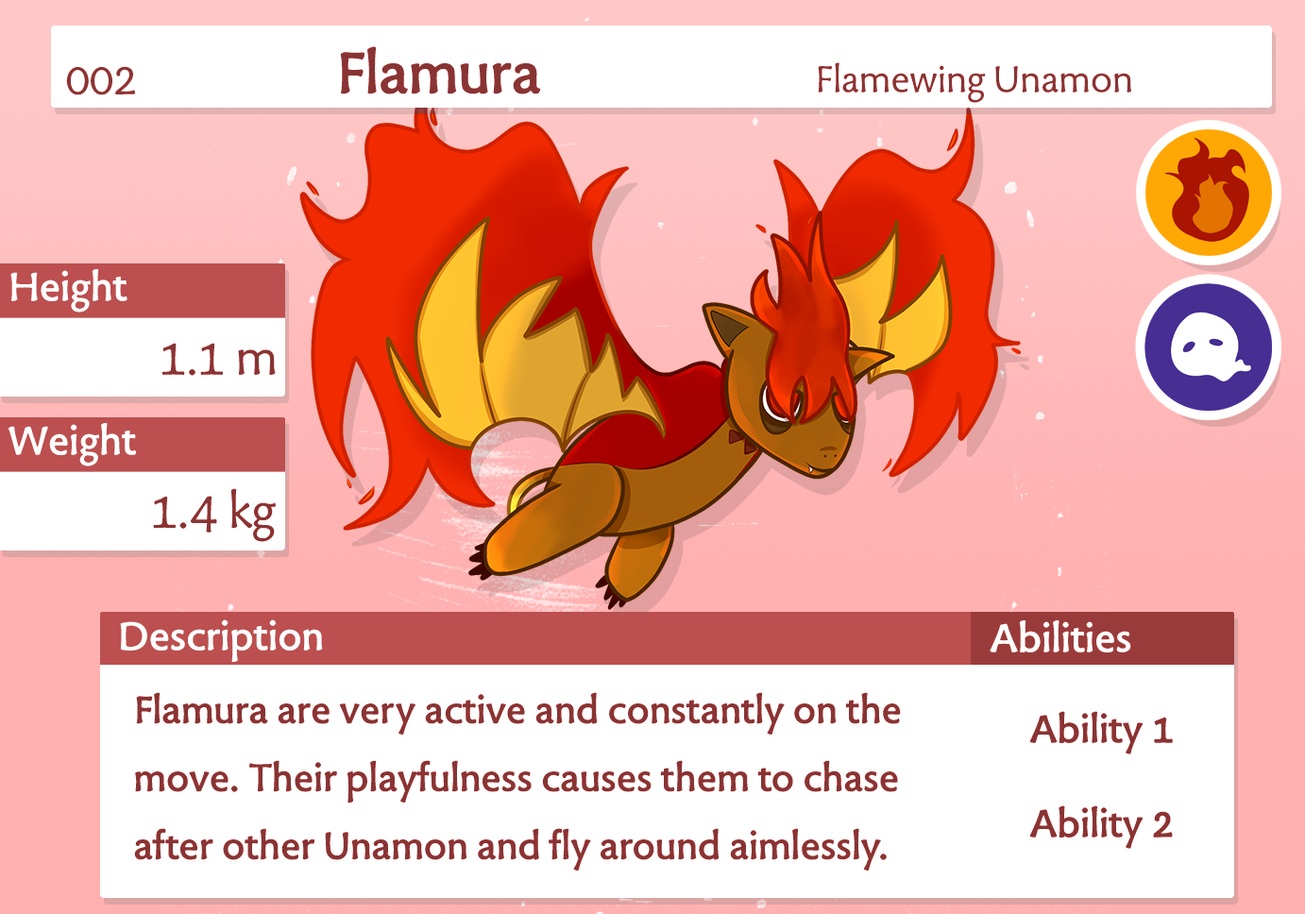
<style>
.page{position:relative;width:1305px;height:914px;background:#ffffff}
.page>*{position:absolute;margin:0}
.t1{font:68px "TuffW01-Bold";color:#883434}
.t2{font:42.8px "TuffW01-Normal";color:#883434}
.t3{font:49.5px "TuffW01-Normal";color:#8a3535}
.t4{font:46.3px "TuffW01-Bold";color:#ffffff}
.t5{font:56.7px "TuffW01-Normal";color:#883434}
.t6{font:44.6px/68px "TuffW01-Bold";color:#883434}
.t7{font:45.3px/94.4px "TuffW01-Bold";color:#883434}
</style>
<div class="page">
<p class="t1" style="left:340px;top:46px;width:201px;height:48px">Flamura</p>
<p class="t2" style="left:818px;top:62px;width:313px;height:41px">Flamewing Unamon</p>
<p class="t3" style="left:66px;top:66px;width:69px;height:29px">002</p>
<p class="t4" style="left:10px;top:269px;width:117px;height:44px">Height</p>
<p class="t5" style="left:161px;top:343px;width:115px;height:33px">1.1 m</p>
<p class="t4" style="left:8px;top:423px;width:128px;height:43px">Weight</p>
<p class="t5" style="left:153px;top:488px;width:123px;height:54px">1.4 kg</p>
<p class="t4" style="left:120px;top:619px;width:203px;height:43px">Description</p>
<p class="t4" style="left:989px;top:620px;width:142px;height:32px">Abilities</p>
<p class="t6" style="left:134px;top:692px;width:767px;height:178px">Flamura are very active and constantly on the<br>move. Their playfulness causes them to chase <br>after other Unamon and fly around aimlessly.</p>
<p class="t7" style="left:1029px;top:711px;width:144px;height:138px;text-align:center">Ability 1<br>Ability 2</p>
</div>
